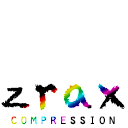
<style>
.page{position:relative;width:128px;height:128px;background:#ffffff}
.page>*{position:absolute;margin:0}
.t1{font:14px "OratorStd";letter-spacing:0.1em}
.t2{font:45px "Chalkduster";letter-spacing:0.1em}
</style>
<div class="page">
<p class="t1" style="left:1px;top:83px;width:124px;height:42px;text-align:center"><span class="t2">zrax<br></span>compression</p>
</div>
